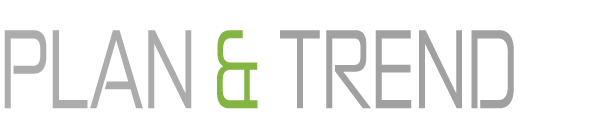
<style>
.page{position:relative;width:600px;height:120px;background:#ffffff}
.page>*{position:absolute;margin:0}
.t1{font:106.5px "ZektonRg-Regular";color:#a1a1a1;scale:0.72 1}
.t2{font:106.5px "ZektonRg-Regular";color:#acacac;scale:0.72 1}
.t3{font:106.5px "ZektonRg-Regular";color:#82b541;scale:0.72 1}
</style>
<div class="page">
<p class="t1" style="left:4px;top:30px;width:510px;height:79px"><span class="t2">PLAN </span><span class="t3">&amp; </span>TREND</p>
</div>
